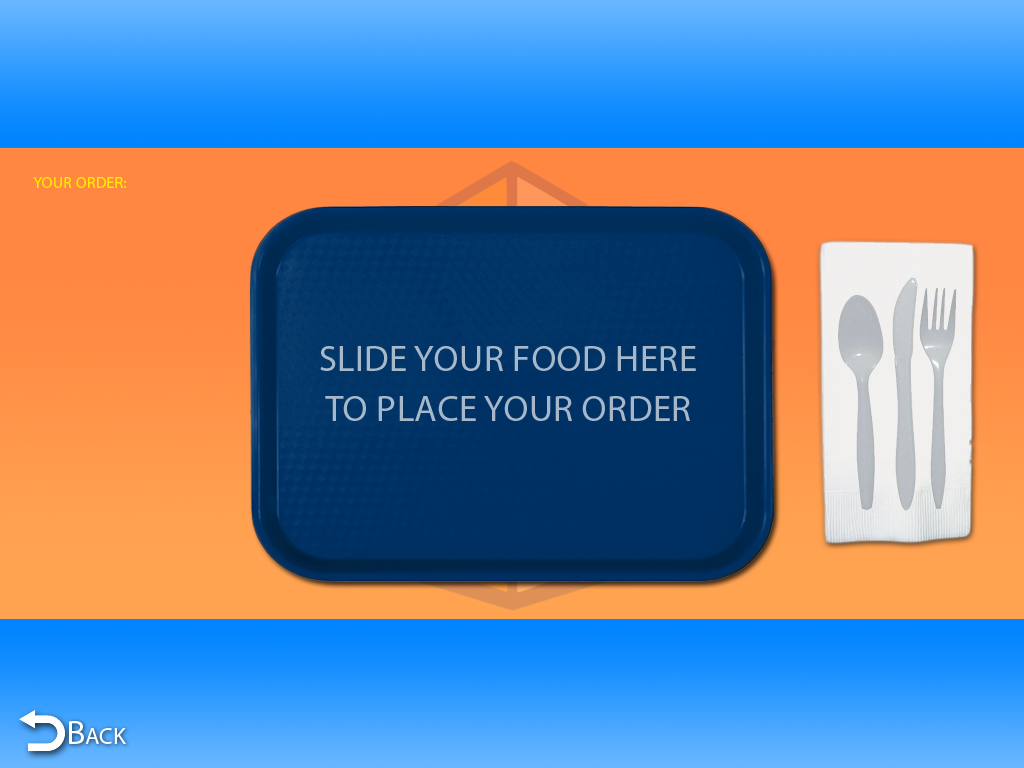
<style>
.page{position:relative;width:1024px;height:768px}
.page>*{position:absolute;margin:0}
.t1{font:16.1px "MyriadPro-Regular";letter-spacing:0.01em;color:#ffea00;font-variant:small-caps}
.t2{font:37px/50px "MyriadPro-Regular";letter-spacing:0.01em;color:#a6b8ca;font-variant:small-caps}
.t3{font:33.3px "MyriadPro-Regular";letter-spacing:0.01em;color:#ffffff;font-variant:small-caps}
</style>
<div class="page">
<p class="t1" style="left:33px;top:177px;width:94px;height:11px">YOUR ORDER:</p>
<p class="t2" style="left:320px;top:346px;width:376px;height:75px;text-align:center">SLIDE YOUR FOOD HERE <br>TO PLACE YOUR ORDER</p>
<p class="t3" style="left:69px;top:721px;width:57px;height:23px">Back</p>
</div>
